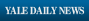
<style>
.page{position:relative;width:89px;height:21px}
.page>*{position:absolute;margin:0}
.t1{font:10px "ModernoFBCond-Bold";color:#ebebeb}
</style>
<div class="page">
<p class="t1" style="left:5px;top:6px;width:80px;height:9px">YALE DAILY NEWS</p>
</div>
